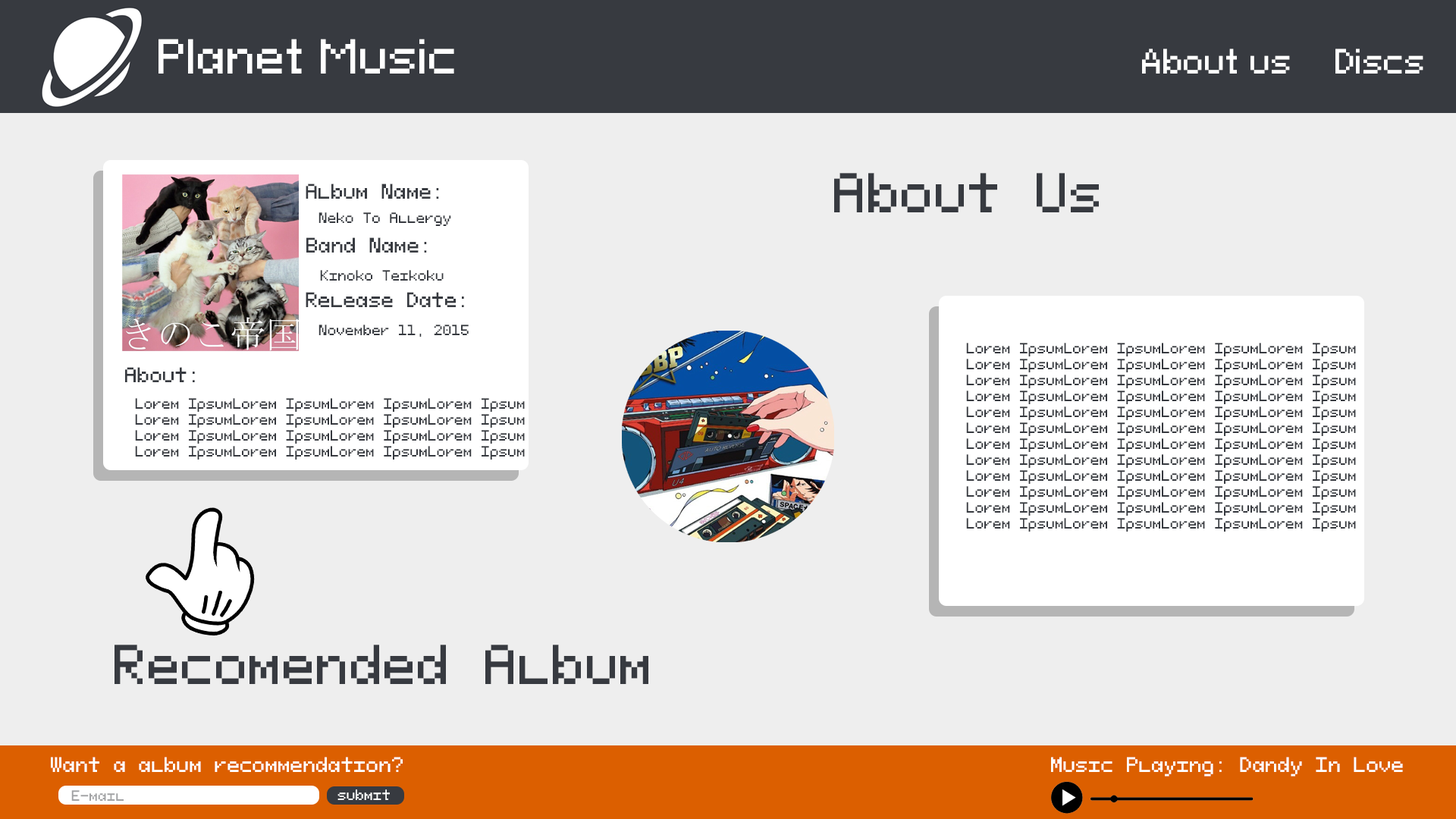
<style>
.page{position:relative;width:1456px;height:819px;background:#eeeeee}
.page>*{position:absolute;margin:0}
.t1{font:44.2px "PixeloidSans";color:#ffffff}
.t2{font:31.6px "PixeloidSans";color:#ffffff}
.t3{font:50.6px "PixeloidMono";color:#373a40}
.t4{font:19px "PixeloidMono";color:#373a40}
.t5{font:13.3px "PixeloidMono";color:#373a40}
.t6{font:19px "PixeloidMono";color:#ffffff}
.t7{font:13.3px "PixeloidMono";color:#a1a2a4}
.t8{font:13.3px "PixeloidMono";color:#ffffff}
</style>
<div class="page">
<p class="t1" style="left:158px;top:39px;width:296px;height:35px">Planet Music</p>
<p class="t2" style="left:1142px;top:49px;width:281px;height:25px">About us    Discs</p>
<p class="t3" style="left:834px;top:173px;width:265px;height:39px">About Us</p>
<p class="t4" style="left:306px;top:184px;width:133px;height:15px">Album Name:</p>
<p class="t5" style="left:318px;top:212px;width:133px;height:14px">Neko To Allergy</p>
<p class="t4" style="left:306px;top:237px;width:121px;height:16px">Band Name:</p>
<p class="t5" style="left:320px;top:270px;width:124px;height:11px">Kinoko Teikoku</p>
<p class="t4" style="left:306px;top:292px;width:158px;height:15px">Release Date:</p>
<p class="t5" style="left:318px;top:325px;width:151px;height:12px">November 11, 2015</p>
<p class="t5" style="left:966px;top:343px;width:390px;height:189px">Lorem IpsumLorem IpsumLorem IpsumLorem Ipsum<br>Lorem IpsumLorem IpsumLorem IpsumLorem Ipsum<br>Lorem IpsumLorem IpsumLorem IpsumLorem Ipsum<br>Lorem IpsumLorem IpsumLorem IpsumLorem Ipsum<br>Lorem IpsumLorem IpsumLorem IpsumLorem Ipsum<br>Lorem IpsumLorem IpsumLorem IpsumLorem Ipsum<br>Lorem IpsumLorem IpsumLorem IpsumLorem Ipsum<br>Lorem IpsumLorem IpsumLorem IpsumLorem Ipsum<br>Lorem IpsumLorem IpsumLorem IpsumLorem Ipsum<br>Lorem IpsumLorem IpsumLorem IpsumLorem Ipsum<br>Lorem IpsumLorem IpsumLorem IpsumLorem Ipsum<br>Lorem IpsumLorem IpsumLorem IpsumLorem Ipsum</p>
<p class="t4" style="left:125px;top:367px;width:70px;height:15px">About:</p>
<p class="t5" style="left:135px;top:398px;width:390px;height:62px">Lorem IpsumLorem IpsumLorem IpsumLorem Ipsum<br>Lorem IpsumLorem IpsumLorem IpsumLorem Ipsum<br>Lorem IpsumLorem IpsumLorem IpsumLorem Ipsum<br>Lorem IpsumLorem IpsumLorem IpsumLorem Ipsum</p>
<p class="t3" style="left:115px;top:645px;width:533px;height:39px">Recomended Album</p>
<p class="t6" style="left:51px;top:757px;width:352px;height:15px">Want a album recommendation?</p>
<p class="t6" style="left:1051px;top:757px;width:352px;height:20px">Music Playing: Dandy In Love</p>
<p class="t7" style="left:71px;top:790px;width:53px;height:11px">E-mail</p>
<p class="t8" style="left:337px;top:789px;width:53px;height:11px">submit</p>
</div>
